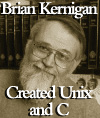
<style>
.page{position:relative;width:100px;height:118px}
.page>*{position:absolute;margin:0}
.t1{font:18.7px "BemboMT-SemiBold";letter-spacing:-0.08em;color:#ffffff;scale:0.95 1}
.t2{font:18.7px/17px "BemboMT-SemiBold";letter-spacing:-0.08em;color:#ffffff;scale:0.95 1}
</style>
<div class="page">
<p class="t1" style="left:1px;top:1px;width:97px;height:18px">Brian Kernigan</p>
<p class="t2" style="left:6px;top:85px;width:87px;height:31px;text-align:center">Created Unix<br>and C</p>
</div>
